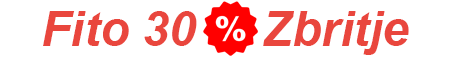
<style>
.page{position:relative;width:468px;height:60px;background:#ffffff}
.page>*{position:absolute;margin:0}
.t1{font:48px "Arial-BoldItalicMT";color:#e9463d}
</style>
<div class="page">
<p class="t1" style="left:43px;top:11px;width:366px;height:44px">Fito 30     Zbritje</p>
</div>
